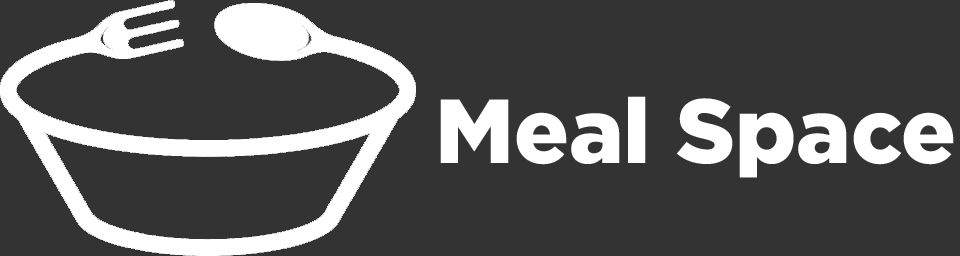
<style>
.page{position:relative;width:960px;height:256px;background:#333333}
.page>*{position:absolute;margin:0}
.t1{font:90.8px "Gotham-Black";color:#ffffff}
</style>
<div class="page">
<p class="t1" style="left:440px;top:96px;width:514px;height:82px">Meal Space</p>
</div>
